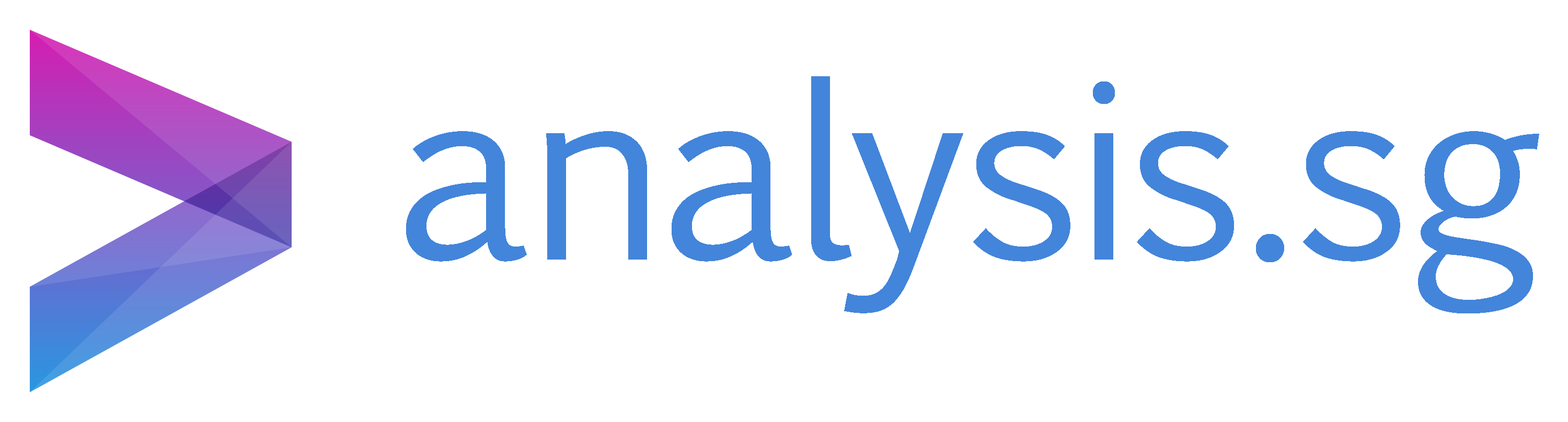
<style>
.page{position:relative;width:1568px;height:422px;background:#ffffff}
.page>*{position:absolute;margin:0}
.t1{font:238.4px "EuphemiaUCAS";color:#4385da}
</style>
<div class="page">
<p class="t1" style="left:406px;top:76px;width:1133px;height:238px">analysis.sg</p>
</div>
